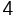
<style>
.page{position:relative;width:16px;height:16px;background:#ffffff}
.page>*{position:absolute;margin:0}
.t1{font:20px "DengXian";color:#000000}
</style>
<div class="page">
<p class="t1" style="left:3px;top:1px;width:10px;height:14px">4</p>
</div>
